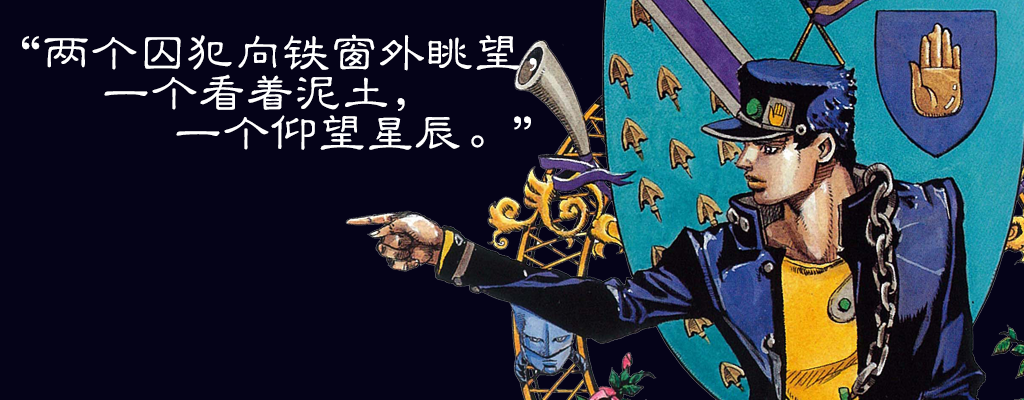
<style>
.page{position:relative;width:1024px;height:400px;background:#050318}
.page>*{position:absolute;margin:0}
.t1{font:48px/40px "GBJenLei-Medium";color:#ffffff}
</style>
<div class="page">
<p class="t1" style="left:22px;top:34px;width:515px;height:116px">“两个囚犯向铁窗外眺望，<br>   一个看着泥土，<br>     一个仰望星辰。”</p>
</div>
